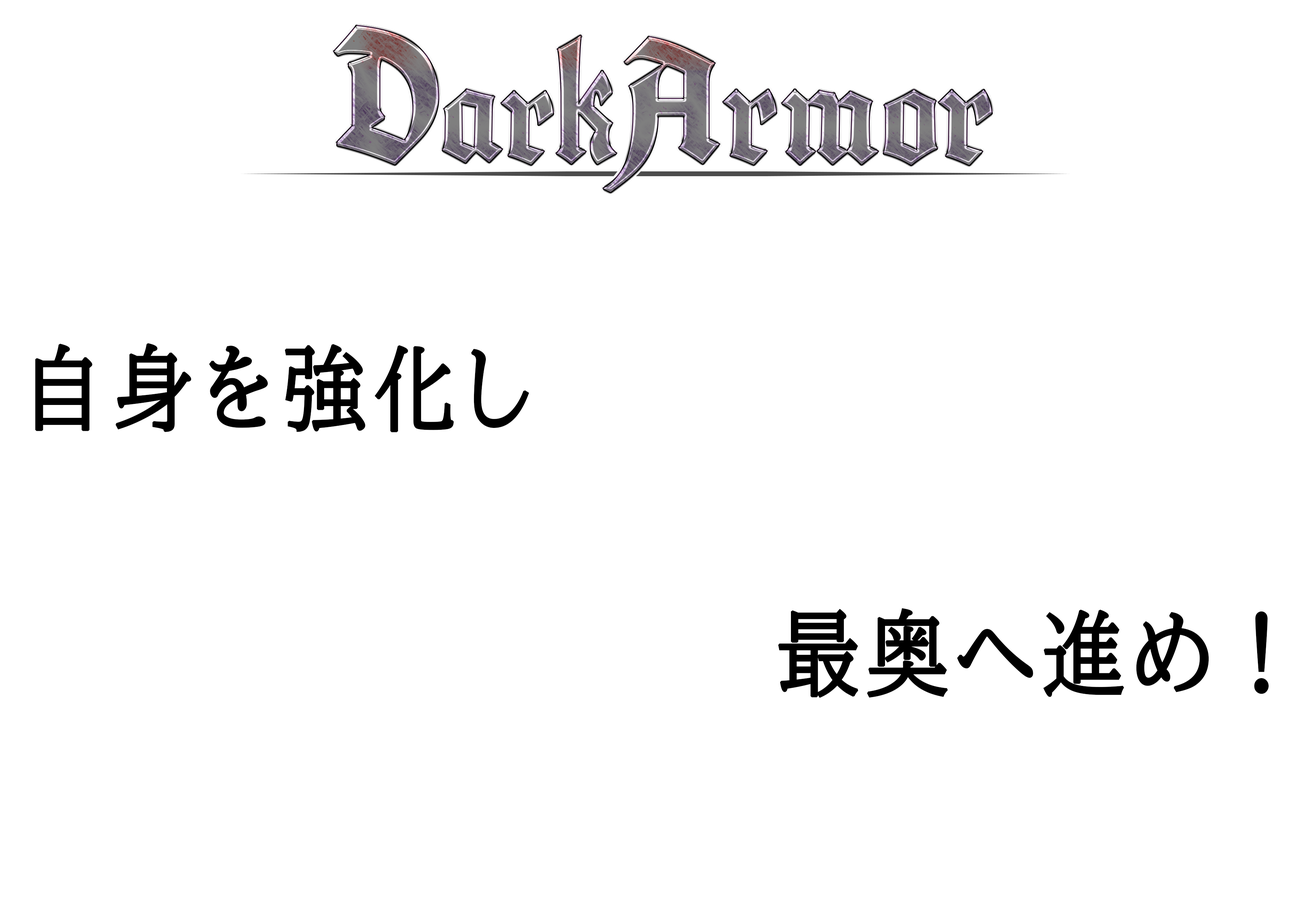
<style>
.page{position:relative;width:1299px;height:918px;background:#ffffff}
.page>*{position:absolute;margin:0}
.t1{font:185.1px "Cabazon";letter-spacing:0.05em;font-weight:bold;scale:0.9 1}
.t2{font:185.1px "Cabazon";letter-spacing:0.05em}
.t3{font:145.7px "Cabazon";letter-spacing:0.05em}
.t4{font:149.1px "Cabazon";letter-spacing:0.05em}
.t5{font:92.6px "BIZ-UDPMincho-Medium";letter-spacing:0.05em;color:#000000;font-weight:bold;scale:0.9 1}
</style>
<div class="page">
<p class="t1" style="left:334px;top:26px;width:104px;height:139px">D</p>
<p class="t2" style="left:603px;top:37px;width:116px;height:155px">A</p>
<p class="t3" style="left:442px;top:90px;width:60px;height:73px">a</p>
<p class="t4" style="left:723px;top:90px;width:53px;height:75px">r</p>
<p class="t4" style="left:782px;top:90px;width:96px;height:75px">m</p>
<p class="t4" style="left:883px;top:90px;width:54px;height:75px">o</p>
<p class="t4" style="left:939px;top:90px;width:53px;height:75px">r</p>
<p class="t3" style="left:501px;top:91px;width:52px;height:74px">r</p>
<p class="t5" style="left:35px;top:343px;width:494px;height:89px">自身を強化し</p>
<p class="t5" style="left:778px;top:608px;width:490px;height:90px">最奥へ進め！</p>
</div>
